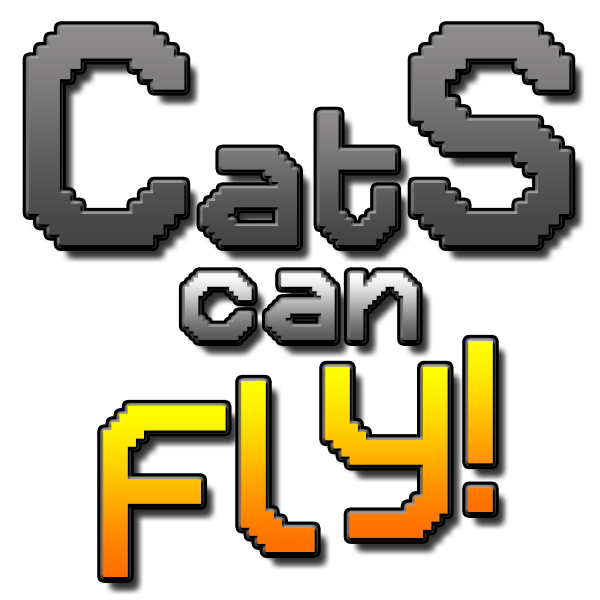
<style>
.page{position:relative;width:600px;height:600px;background:#ffffff}
.page>*{position:absolute;margin:0}
.t1{font:280px "Retron2000";letter-spacing:0.02em}
.t2{font:170px "Retron2000";letter-spacing:0.02em}
.t3{font:120px "Retron2000";letter-spacing:0.02em}
.t4{font:220px "Retron2000";letter-spacing:0.02em}
</style>
<div class="page">
<p class="t1" style="left:28px;top:27px;width:157px;height:218px">C</p>
<p class="t1" style="left:413px;top:27px;width:157px;height:218px">S</p>
<p class="t2" style="left:202px;top:112px;width:194px;height:133px">at</p>
<p class="t3" style="left:184px;top:273px;width:233px;height:67px">can</p>
<p class="t4" style="left:468px;top:340px;width:25px;height:172px">!</p>
<p class="t4" style="left:325px;top:366px;width:123px;height:172px">y</p>
<p class="t4" style="left:241px;top:380px;width:74px;height:172px">l</p>
<p class="t4" style="left:103px;top:405px;width:123px;height:172px">F</p>
</div>
